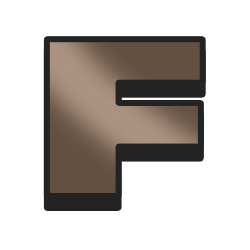
<style>
.page{position:relative;width:250px;height:250px;background:#ffffff}
.page>*{position:absolute;margin:0}
.t1{font:224px "Gilroy-Heavy";letter-spacing:0.1em;scale:1.6 1}
</style>
<div class="page">
<p class="t1" style="left:46px;top:39px;width:157px;height:157px">F</p>
<p class="t1" style="left:46px;top:51px;width:157px;height:157px">F</p>
</div>
